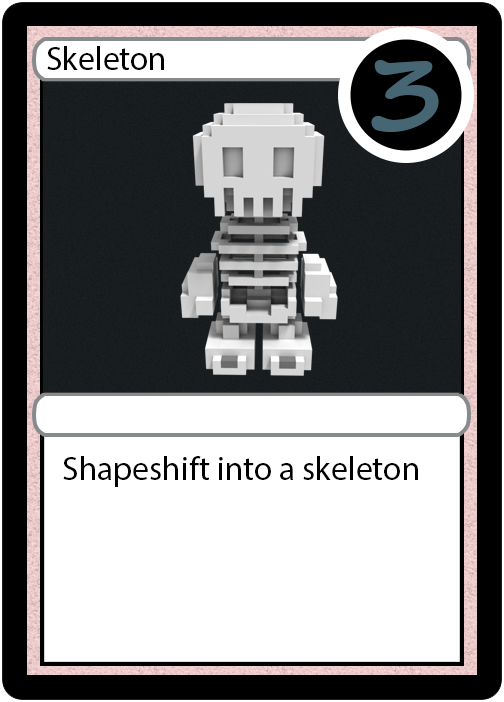
<style>
.page{position:relative;width:504px;height:702px;background:#ffffff}
.page>*{position:absolute;margin:0}
.t1{font:33.3px "MyriadPro-Regular";color:#000000}
.t2{font:111px "SegoeScript-Bold";color:#466674}
</style>
<div class="page">
<p class="t1" style="left:47px;top:46px;width:117px;height:24px">Skeleton</p>
<p class="t2" style="left:371px;top:60px;width:68px;height:72px">3</p>
<p class="t1" style="left:63px;top:456px;width:355px;height:31px">Shapeshift into a skeleton</p>
</div>
